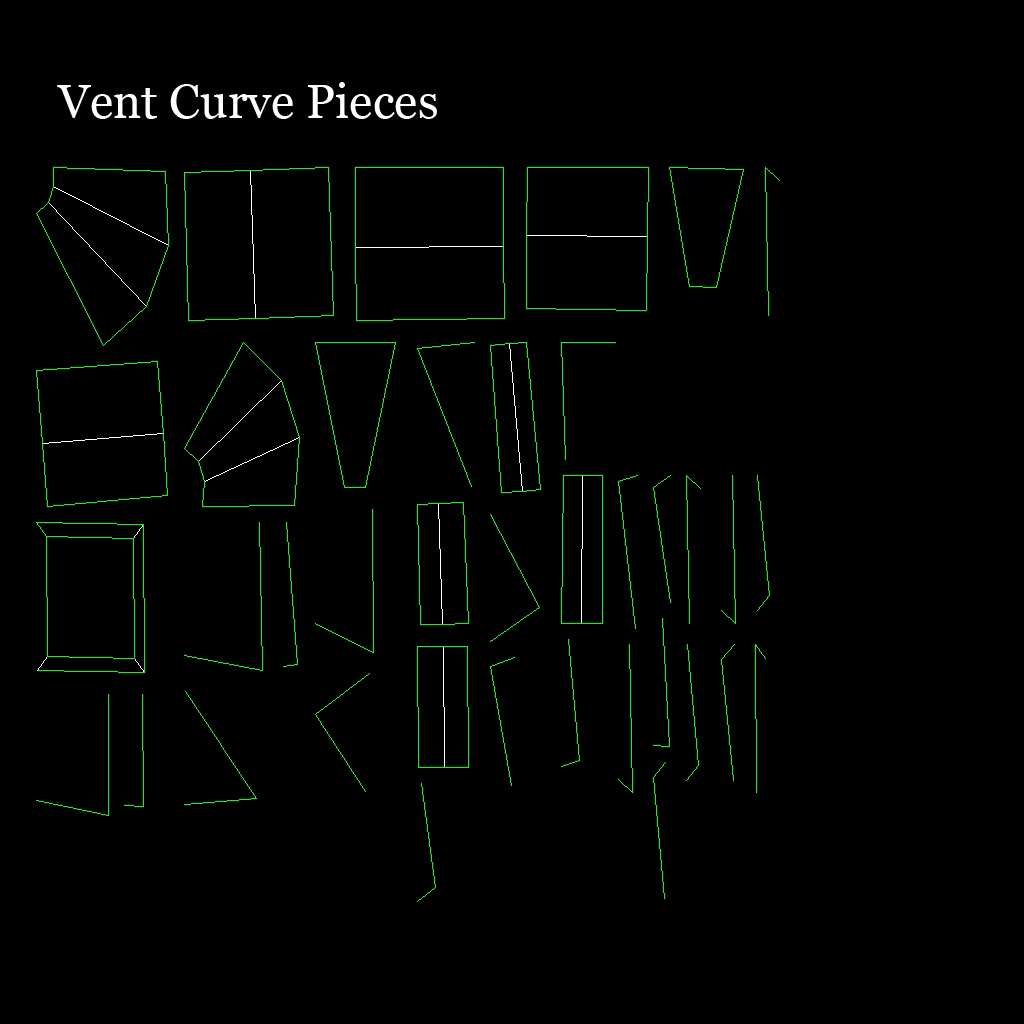
<style>
.page{position:relative;width:1024px;height:1024px;background:#000000}
.page>*{position:absolute;margin:0}
.t1{font:48px "Georgia";color:#ffffff}
</style>
<div class="page">
<p class="t1" style="left:57px;top:82px;width:380px;height:37px">Vent Curve Pieces</p>
</div>
